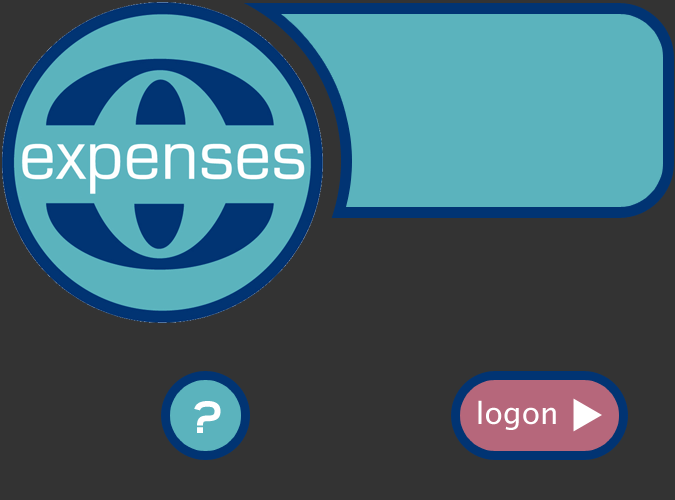
<style>
.page{position:relative;width:675px;height:500px;background:#333333}
.page>*{position:absolute;margin:0}
.t1{font:48px "SFArborcrestHeavy";color:#ffffff}
.t2{font:30px "LucidaSansUnicode";color:#ffffff}
</style>
<div class="page">
<p class="t1" style="left:194px;top:401px;width:27px;height:32px">?</p>
<p class="t2" style="left:478px;top:400px;width:78px;height:30px">logon</p>
</div>
